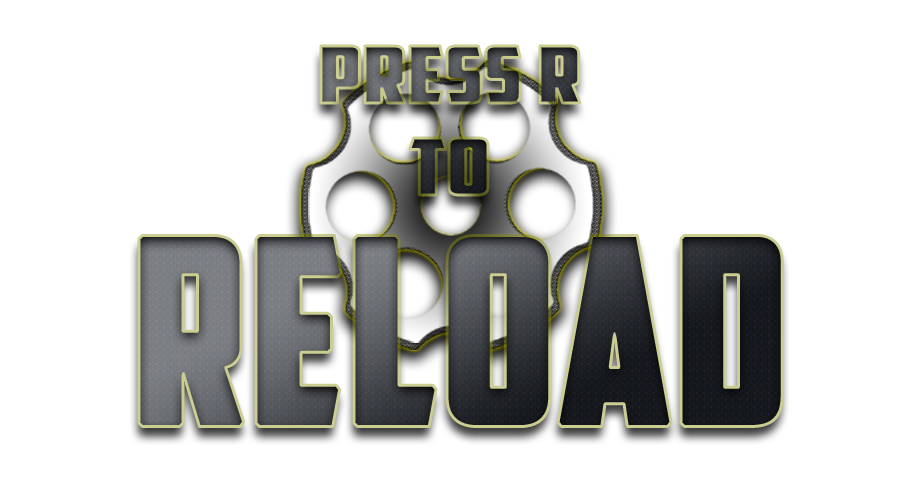
<style>
.page{position:relative;width:900px;height:500px;background:#ffffff}
.page>*{position:absolute;margin:0}
.t1{font:77.2px "AmericanCaptain";font-weight:bold;scale:1.25 1}
.t2{font:253.9px "AmericanCaptain";font-weight:bold}
</style>
<div class="page">
<p class="t1" style="left:321px;top:46px;width:259px;height:149px;text-align:center">PRESS R<br>TO</p>
<p class="t2" style="left:139px;top:235px;width:644px;height:192px">RELOAD</p>
</div>
